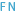
<style>
.page{position:relative;width:16px;height:16px;background:#ffffff}
.page>*{position:absolute;margin:0}
.t1{font:12px "MyriadPro-Regular";color:#44a7ce}
</style>
<div class="page">
<p class="t1" style="left:0px;top:2px;width:15px;height:9px">F N</p>
</div>
